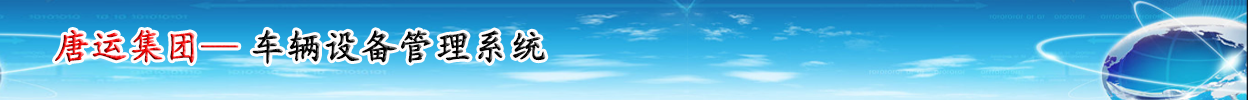
<style>
.page{position:relative;width:1248px;height:100px}
.page>*{position:absolute;margin:0}
.t1{font:36px "STKaiti";letter-spacing:0.005em;font-weight:bold}
</style>
<div class="page">
<p class="t1" style="left:55px;top:29px;width:491px;height:35px">唐运集团— 车辆设备管理系统</p>
</div>
